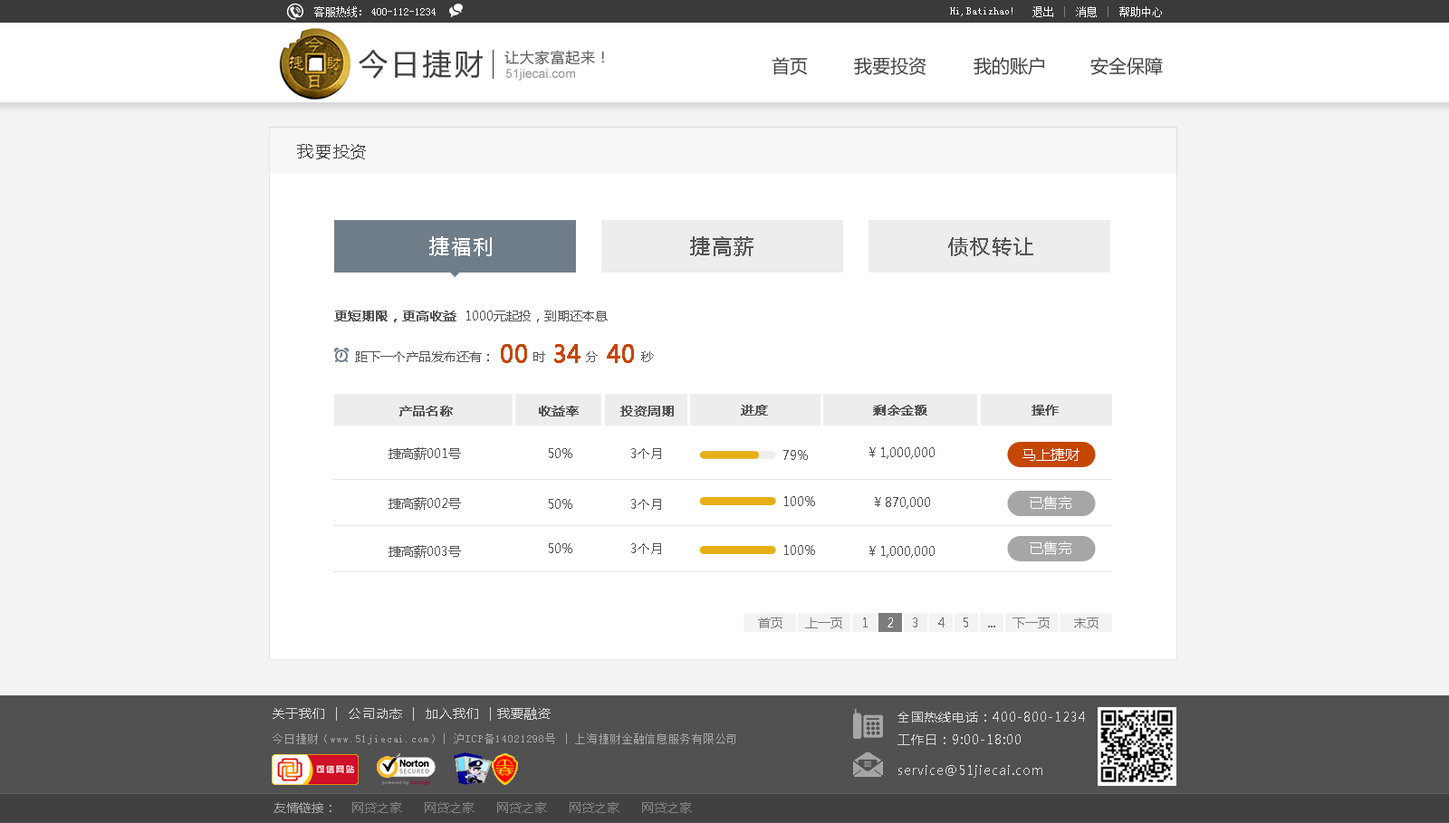
<style>
.page{position:relative;width:1449px;height:823px;background:#ffffff}
.page>*{position:absolute;margin:0}
.t1{font:10.9px "SimSun";color:#ffffff}
.t2{font:29px "MicrosoftYaHei";letter-spacing:0.1em;color:#3f3f3f}
.t3{font:14.5px "MicrosoftYaHei";letter-spacing:0.05em;color:#575757}
.t4{font:18.1px "MicrosoftYaHei";color:#414141}
.t5{font:12.7px "ArialMT";color:#969697}
.t6{font:16.3px "MicrosoftYaHei";letter-spacing:0.1em;color:#3f3f3f}
.t7{font:19.9px "MicrosoftYaHei";letter-spacing:0.1em;color:#ffffff}
.t8{font:19.9px "MicrosoftYaHei";letter-spacing:0.1em;color:#545454}
.t9{font:12.7px "MicrosoftYaHei";color:#545454;font-weight:bold}
.t10{font:12.7px "MicrosoftYaHei";color:#545454}
.t11{font:23.5px "MicrosoftYaHei";color:#c44704;font-weight:bold}
.t12{font:14.5px "MicrosoftYaHei";color:#ffffff}
.t13{font:12.7px "MicrosoftYaHei";color:#7c7c7c}
.t14{font:12.7px "MicrosoftYaHei";color:#6e7071}
.t15{font:12.7px "MicrosoftYaHei";color:#ffffff}
.t16{font:12.7px "MicrosoftYaHei";letter-spacing:0.07em;color:#dbdbdb}
.t17{font:12.7px "MicrosoftYaHei";letter-spacing:0.07em;color:#dadada}
.t18{font:10.9px "SimSun";letter-spacing:0.07em;color:#a7a7a7}
.t19{font:12.7px "MicrosoftYaHei";color:#858484}
.t20{font:12.7px "MicrosoftYaHei";color:#a7a7a7}
</style>
<div class="page">
<p class="t1" style="left:314px;top:6px;width:47px;height:11px">客服热线：</p>
<p class="t1" style="left:371px;top:8px;width:65px;height:7px">400-112-1234</p>
<p class="t1" style="left:950px;top:7px;width:62px;height:9px">Hi,Batizhao!</p>
<p class="t1" style="left:1032px;top:6px;width:130px;height:11px">退出    消息    帮助中心</p>
<p class="t2" style="left:359px;top:50px;width:124px;height:29px">今日捷财</p>
<p class="t3" style="left:504px;top:50px;width:100px;height:14px">让大家富起来！</p>
<p class="t4" style="left:771px;top:57px;width:37px;height:18px">首页</p>
<p class="t4" style="left:854px;top:57px;width:72px;height:18px">我要投资</p>
<p class="t4" style="left:973px;top:57px;width:71px;height:18px">我的账户</p>
<p class="t4" style="left:1090px;top:57px;width:73px;height:18px">安全保障</p>
<p class="t5" style="left:505px;top:69px;width:70px;height:12px">51jiecai.com</p>
<p class="t6" style="left:297px;top:144px;width:69px;height:15px">我要投资</p>
<p class="t7" style="left:429px;top:236px;width:63px;height:20px">捷福利</p>
<p class="t8" style="left:690px;top:236px;width:63px;height:20px">捷高薪</p>
<p class="t8" style="left:948px;top:237px;width:85px;height:19px">债权转让</p>
<p class="t9" style="left:334px;top:311px;width:122px;height:11px">更短期限，更高收益</p>
<p class="t10" style="left:466px;top:311px;width:142px;height:11px">1000元起投，到期还本息</p>
<p class="t10" style="left:355px;top:351px;width:134px;height:11px">距下一个产品发布还有：</p>
<p class="t11" style="left:501px;top:344px;width:26px;height:19px">00</p>
<p class="t10" style="left:533px;top:351px;width:12px;height:11px">时</p>
<p class="t11" style="left:554px;top:344px;width:26px;height:19px">34</p>
<p class="t10" style="left:586px;top:351px;width:12px;height:11px">分</p>
<p class="t11" style="left:607px;top:344px;width:27px;height:19px">40</p>
<p class="t10" style="left:641px;top:351px;width:13px;height:11px">秒</p>
<p class="t9" style="left:399px;top:406px;width:54px;height:11px">产品名称</p>
<p class="t9" style="left:539px;top:406px;width:40px;height:11px">收益率</p>
<p class="t9" style="left:620px;top:406px;width:54px;height:11px">投资周期</p>
<p class="t9" style="left:741px;top:405px;width:27px;height:11px">进度</p>
<p class="t9" style="left:873px;top:405px;width:54px;height:11px">剩余金额</p>
<p class="t9" style="left:1031px;top:405px;width:27px;height:11px">操作</p>
<p class="t10" style="left:388px;top:447px;width:73px;height:13px">捷高薪001号</p>
<p class="t10" style="left:549px;top:448px;width:23px;height:10px">50%</p>
<p class="t10" style="left:631px;top:448px;width:30px;height:11px">3个月</p>
<p class="t10" style="left:869px;top:447px;width:65px;height:12px">￥1,000,000</p>
<p class="t12" style="left:1022px;top:448px;width:57px;height:13px">马上捷财</p>
<p class="t10" style="left:783px;top:450px;width:25px;height:10px">79%</p>
<p class="t10" style="left:388px;top:497px;width:73px;height:13px">捷高薪002号</p>
<p class="t10" style="left:784px;top:496px;width:31px;height:10px">100%</p>
<p class="t10" style="left:875px;top:497px;width:55px;height:12px">￥870,000</p>
<p class="t12" style="left:1030px;top:496px;width:41px;height:14px">已售完</p>
<p class="t10" style="left:549px;top:499px;width:23px;height:10px">50%</p>
<p class="t10" style="left:631px;top:499px;width:30px;height:11px">3个月</p>
<p class="t10" style="left:388px;top:545px;width:73px;height:13px">捷高薪003号</p>
<p class="t10" style="left:549px;top:543px;width:23px;height:10px">50%</p>
<p class="t10" style="left:631px;top:543px;width:30px;height:11px">3个月</p>
<p class="t10" style="left:784px;top:545px;width:31px;height:10px">100%</p>
<p class="t10" style="left:869px;top:546px;width:65px;height:12px">￥1,000,000</p>
<p class="t12" style="left:1030px;top:541px;width:41px;height:14px">已售完</p>
<p class="t13" style="left:758px;top:618px;width:24px;height:10px">首页</p>
<p class="t13" style="left:805px;top:618px;width:37px;height:10px">上一页</p>
<p class="t14" style="left:863px;top:618px;width:4px;height:9px">1</p>
<p class="t15" style="left:887px;top:618px;width:6px;height:9px">2</p>
<p class="t14" style="left:913px;top:618px;width:4px;height:9px">3</p>
<p class="t14" style="left:938px;top:618px;width:6px;height:9px">4</p>
<p class="t14" style="left:963px;top:618px;width:5px;height:9px">5</p>
<p class="t13" style="left:1012px;top:618px;width:37px;height:10px">下一页</p>
<p class="t13" style="left:1074px;top:618px;width:24px;height:10px">末页</p>
<p class="t14" style="left:988px;top:626px;width:7px;height:1px">...</p>
<p class="t16" style="left:273px;top:707px;width:278px;height:14px">关于我们  |  公司动态  |  加入我们  | 我要融资</p>
<p class="t17" style="left:897px;top:712px;width:188px;height:33px">全国热线电话：400-800-1234<br>工作日：9:00-18:00</p>
<p class="t18" style="left:273px;top:733px;width:462px;height:11px">今日捷财（www.51jiecai.com）| 沪ICP备14021298号 | 上海捷财金融信息服务有限公司</p>
<p class="t17" style="left:898px;top:765px;width:144px;height:13px">service@51jiecai.com</p>
<p class="t19" style="left:273px;top:802px;width:419px;height:11px"><span class="t20">友情链接：</span>    网贷之家      网贷之家      网贷之家      网贷之家      网贷之家</p>
</div>
